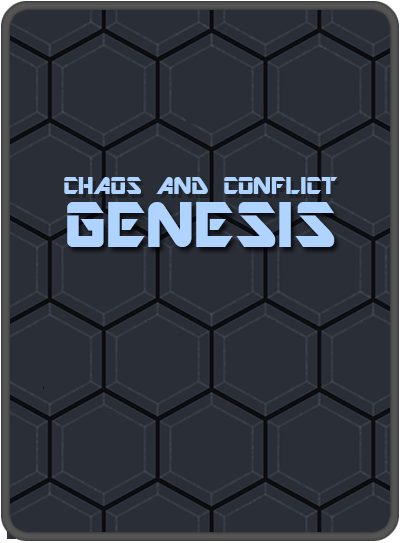
<style>
.page{position:relative;width:400px;height:543px;background:#2a2e37}
.page>*{position:absolute;margin:0}
.t1{font:27px "ARDESTINE";color:#aed4ff}
.t2{font:72px "ARDESTINE";color:#aed4ff}
</style>
<div class="page">
<p class="t1" style="left:64px;top:177px;width:274px;height:17px">CHAOS AND CONFLICT</p>
<p class="t2" style="left:67px;top:202px;width:268px;height:45px">GENESIS</p>
</div>
